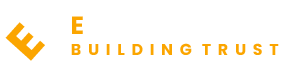
<style>
.page{position:relative;width:290px;height:66px;background:#ffffff}
.page>*{position:absolute;margin:0}
.t1{font:48.8px "Poppins-Bold";color:#fca600}
.t2{font:15.8px "Poppins-Bold";color:#fca600}
</style>
<div class="page">
<p class="t1" style="left:5px;top:22px;width:40px;height:39px;rotate:-48deg">E</p>
<p class="t2" style="left:71px;top:43px;width:208px;height:12px">B  U  I  L  D  I  N  G   T  R  U  S  T</p>
</div>
